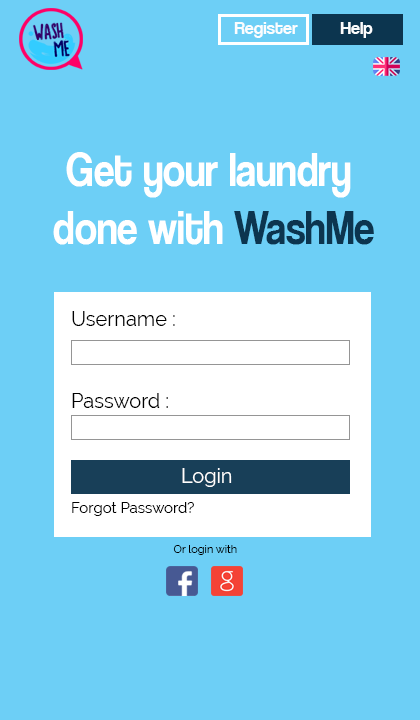
<style>
.page{position:relative;width:420px;height:720px;background:#6dcff6}
.page>*{position:absolute;margin:0}
.t1{font:18px "CoolveticaRg-Regular";color:#fbfdfe}
.t2{font:48px "CoolveticaRg-Regular";color:#ffffff;scale:0.86 1}
.t3{font:48px "CoolveticaRg-Regular";color:#0c354f;scale:0.86 1}
.t4{font:20px "Raleway";color:#000000}
.t5{font:20px "Raleway";color:#ffffff}
.t6{font:15px "Raleway";color:#000000}
.t7{font:11px "Raleway";color:#000000}
</style>
<div class="page">
<p class="t1" style="left:234px;top:22px;width:64px;height:16px">Register</p>
<p class="t1" style="left:340px;top:22px;width:33px;height:16px">Help</p>
<p class="t2" style="left:53px;top:152px;width:321px;height:93px;text-align:center">Get your laundry <br>done with <span class="t3">WashMe</span></p>
<p class="t4" style="left:72px;top:311px;width:103px;height:15px">Username :</p>
<p class="t4" style="left:72px;top:393px;width:96px;height:15px">Password :</p>
<p class="t5" style="left:182px;top:468px;width:50px;height:19px">Login</p>
<p class="t6" style="left:72px;top:502px;width:122px;height:14px">Forgot Password?</p>
<p class="t7" style="left:173px;top:545px;width:64px;height:10px">Or login with</p>
</div>
